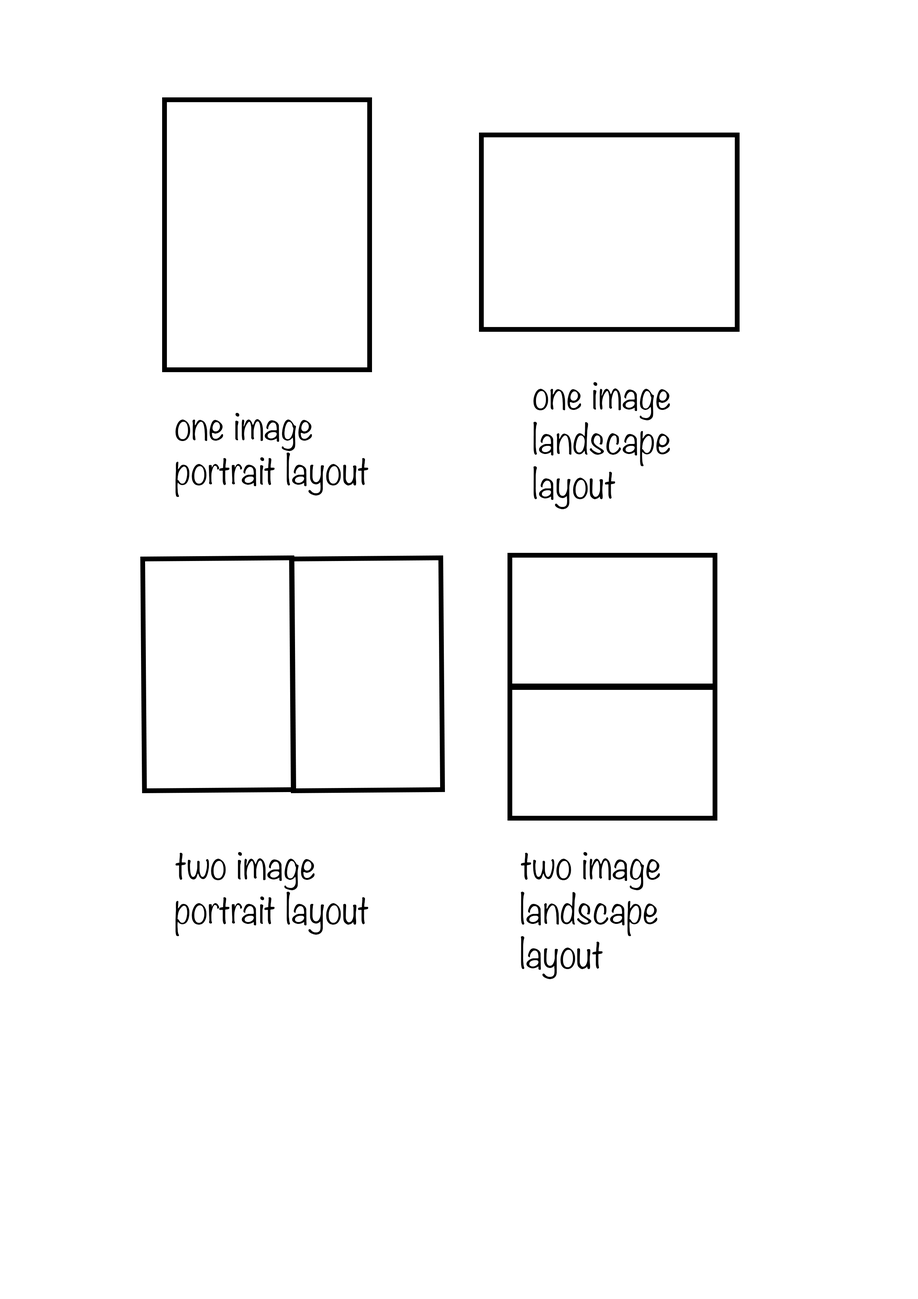
<style>
.page{position:relative;width:918px;height:1299px;background:#ffffff}
.page>*{position:absolute;margin:0}
.t1{font:37px "Noteworthy-Light";color:#000000}
</style>
<div class="page">
<p class="t1" style="left:533px;top:382px;width:137px;height:127px">one image landscape layout</p>
<p class="t1" style="left:175px;top:413px;width:193px;height:84px">one image portrait layout</p>
<p class="t1" style="left:175px;top:852px;width:193px;height:84px">two image portrait layout</p>
<p class="t1" style="left:521px;top:852px;width:139px;height:127px">two image landscape  layout</p>
</div>
